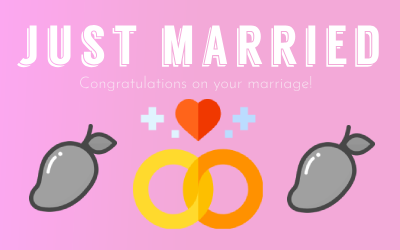
<style>
.page{position:relative;width:400px;height:250px;background:#f3a9d8}
.page>*{position:absolute;margin:0}
.t1{font:55px "Langdon";letter-spacing:0.122em;color:#ffffff}
.t2{font:16px "JosefinSans-Light";color:#f8e0f2}
</style>
<div class="page">
<p class="t1" style="left:17px;top:25px;width:362px;height:43px">just married</p>
<p class="t2" style="left:80px;top:75px;width:232px;height:17px">Congratulations on your marriage!</p>
</div>
